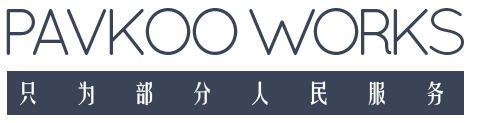
<style>
.page{position:relative;width:478px;height:123px;background:#ffffff}
.page>*{position:absolute;margin:0}
.t1{font:66px "Quicksand-Regular";letter-spacing:-0.14em;color:#3a4456}
.t2{font:24px "FZYTK--GBK1-0";letter-spacing:1.42em;color:#fefefe}
</style>
<div class="page">
<p class="t1" style="left:6px;top:8px;width:458px;height:47px">PAVKOO WORKS</p>
<p class="t2" style="left:20px;top:81px;width:424px;height:25px">只为部分人民服务</p>
</div>
